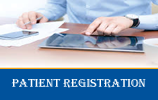
<style>
.page{position:relative;width:158px;height:100px;background:#00529c}
.page>*{position:absolute;margin:0}
.t1{font:12px "Algerian";color:#ffffff}
</style>
<div class="page">
<p class="t1" style="left:11px;top:79px;width:135px;height:9px">Patient Registration</p>
</div>
